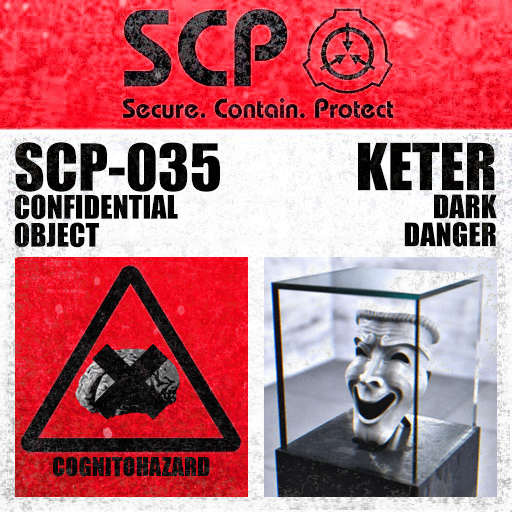
<style>
.page{position:relative;width:512px;height:512px}
.page>*{position:absolute;margin:0}
.t1{font:30px/28px "Impact";color:#000000}
.t2{font:60px/28px "Impact";color:#000000}
</style>
<div class="page">
<p class="t1" style="left:14px;top:142px;width:206px;height:106px"><span class="t2">SCP-035<br></span>CONFIDENTIAL<br>OBJECT</p>
<p class="t1" style="left:358px;top:142px;width:139px;height:105px;text-align:right"><span class="t2">KETER<br></span>DARK<br>DANGER</p>
</div>
